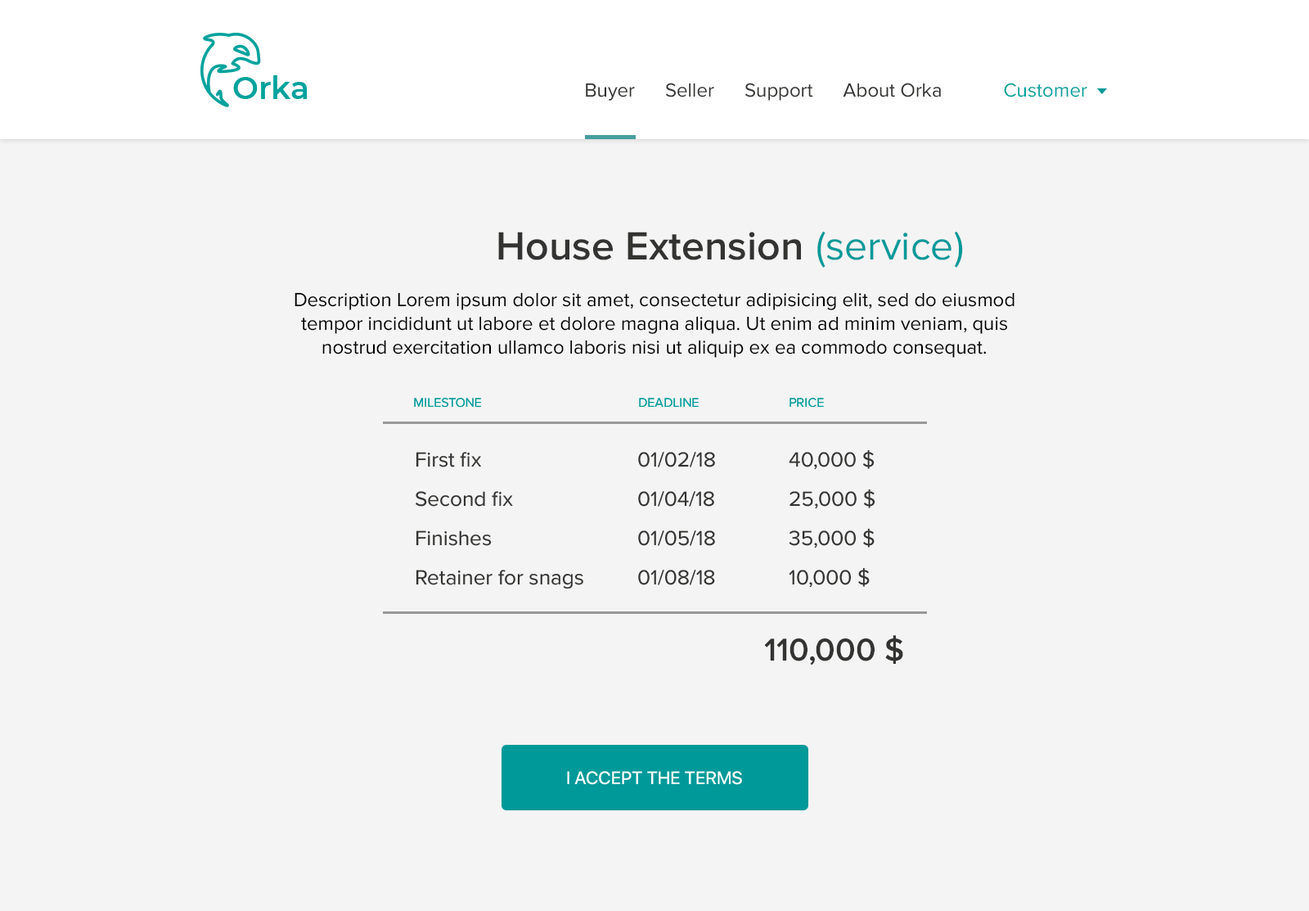
<style>
.page{position:relative;width:1309px;height:911px;background:#f4f4f4}
.page>*{position:absolute;margin:0}
.t1{font:19.6px "ProximaNova-Regular";color:#333332}
.t2{font:19.6px "ProximaNova-Regular";color:#00a29c}
.t3{font:40.9px "ProximaNova-Semibold";color:#333332}
.t4{font:40.9px "ProximaNova-Regular";color:#009999}
.t5{font:19.6px "ProximaNova-Regular";color:#000000}
.t6{font:13.1px "ProximaNova-Regular";color:#009999;text-transform:uppercase}
.t7{font:21.3px/39.3px "ProximaNova-Regular";color:#333332}
.t8{font:32.7px "ProximaNova-Semibold";color:#333332}
.t9{font:18px "SFUIDisplay-Medium";color:#ffffff;text-transform:uppercase}
</style>
<div class="page">
<p class="t1" style="left:586px;top:83px;width:355px;height:18px">Buyer      Seller      Support      About Orka</p>
<p class="t2" style="left:1004px;top:83px;width:84px;height:14px">Customer</p>
<p class="t3" style="left:498px;top:232px;width:303px;height:28px">House Extension</p>
<p class="t4" style="left:817px;top:231px;width:146px;height:37px">(service)</p>
<p class="t5" style="left:295px;top:292px;width:720px;height:66px;text-align:center">Description Lorem ipsum dolor sit amet, consectetur adipisicing elit, sed do eiusmod tempor incididunt ut labore et dolore magna aliqua. Ut enim ad minim veniam, quis nostrud exercitation ullamco laboris nisi ut aliquip ex ea commodo consequat.</p>
<p class="t6" style="left:414px;top:398px;width:67px;height:10px">milestone</p>
<p class="t6" style="left:639px;top:398px;width:60px;height:9px">Deadline</p>
<p class="t6" style="left:790px;top:398px;width:34px;height:10px">Price</p>
<p class="t7" style="left:789px;top:449px;width:87px;height:139px">40,000 $<br>25,000 $<br>35,000 $<br>10,000 $</p>
<p class="t7" style="left:416px;top:452px;width:167px;height:137px">First fix<br>Second fix<br>Finishes<br>Retainer for snags</p>
<p class="t7" style="left:638px;top:452px;width:77px;height:133px">01/02/18<br>01/04/18<br>01/05/18<br>01/08/18</p>
<p class="t8" style="left:764px;top:635px;width:139px;height:30px">110,000 $</p>
<p class="t9" style="left:567px;top:771px;width:175px;height:14px">I accept the terms</p>
</div>
